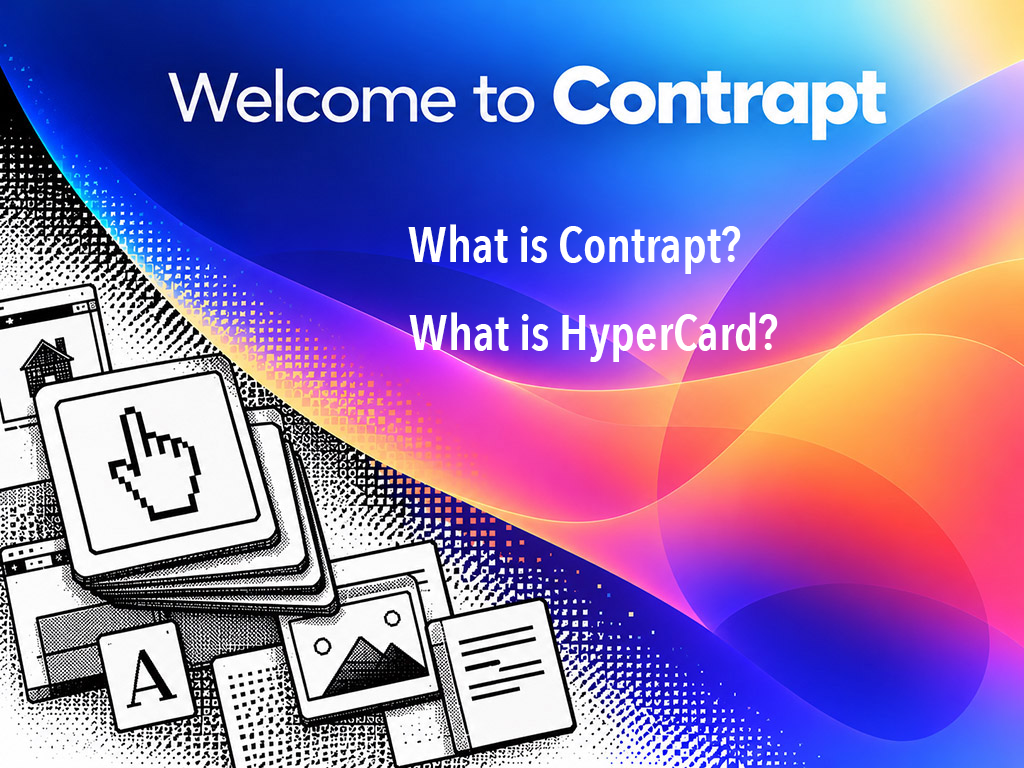
<style>
.page{position:relative;width:1024px;height:768px}
.page>*{position:absolute;margin:0}
.t1{font:50px "AvenirNextCondensed-DemiBold";color:#ffffff}
</style>
<div class="page">
<p class="t1" style="left:408px;top:224px;width:333px;height:50px">What is Contrapt?</p>
<p class="t1" style="left:409px;top:312px;width:369px;height:50px">What is HyperCard?</p>
</div>
